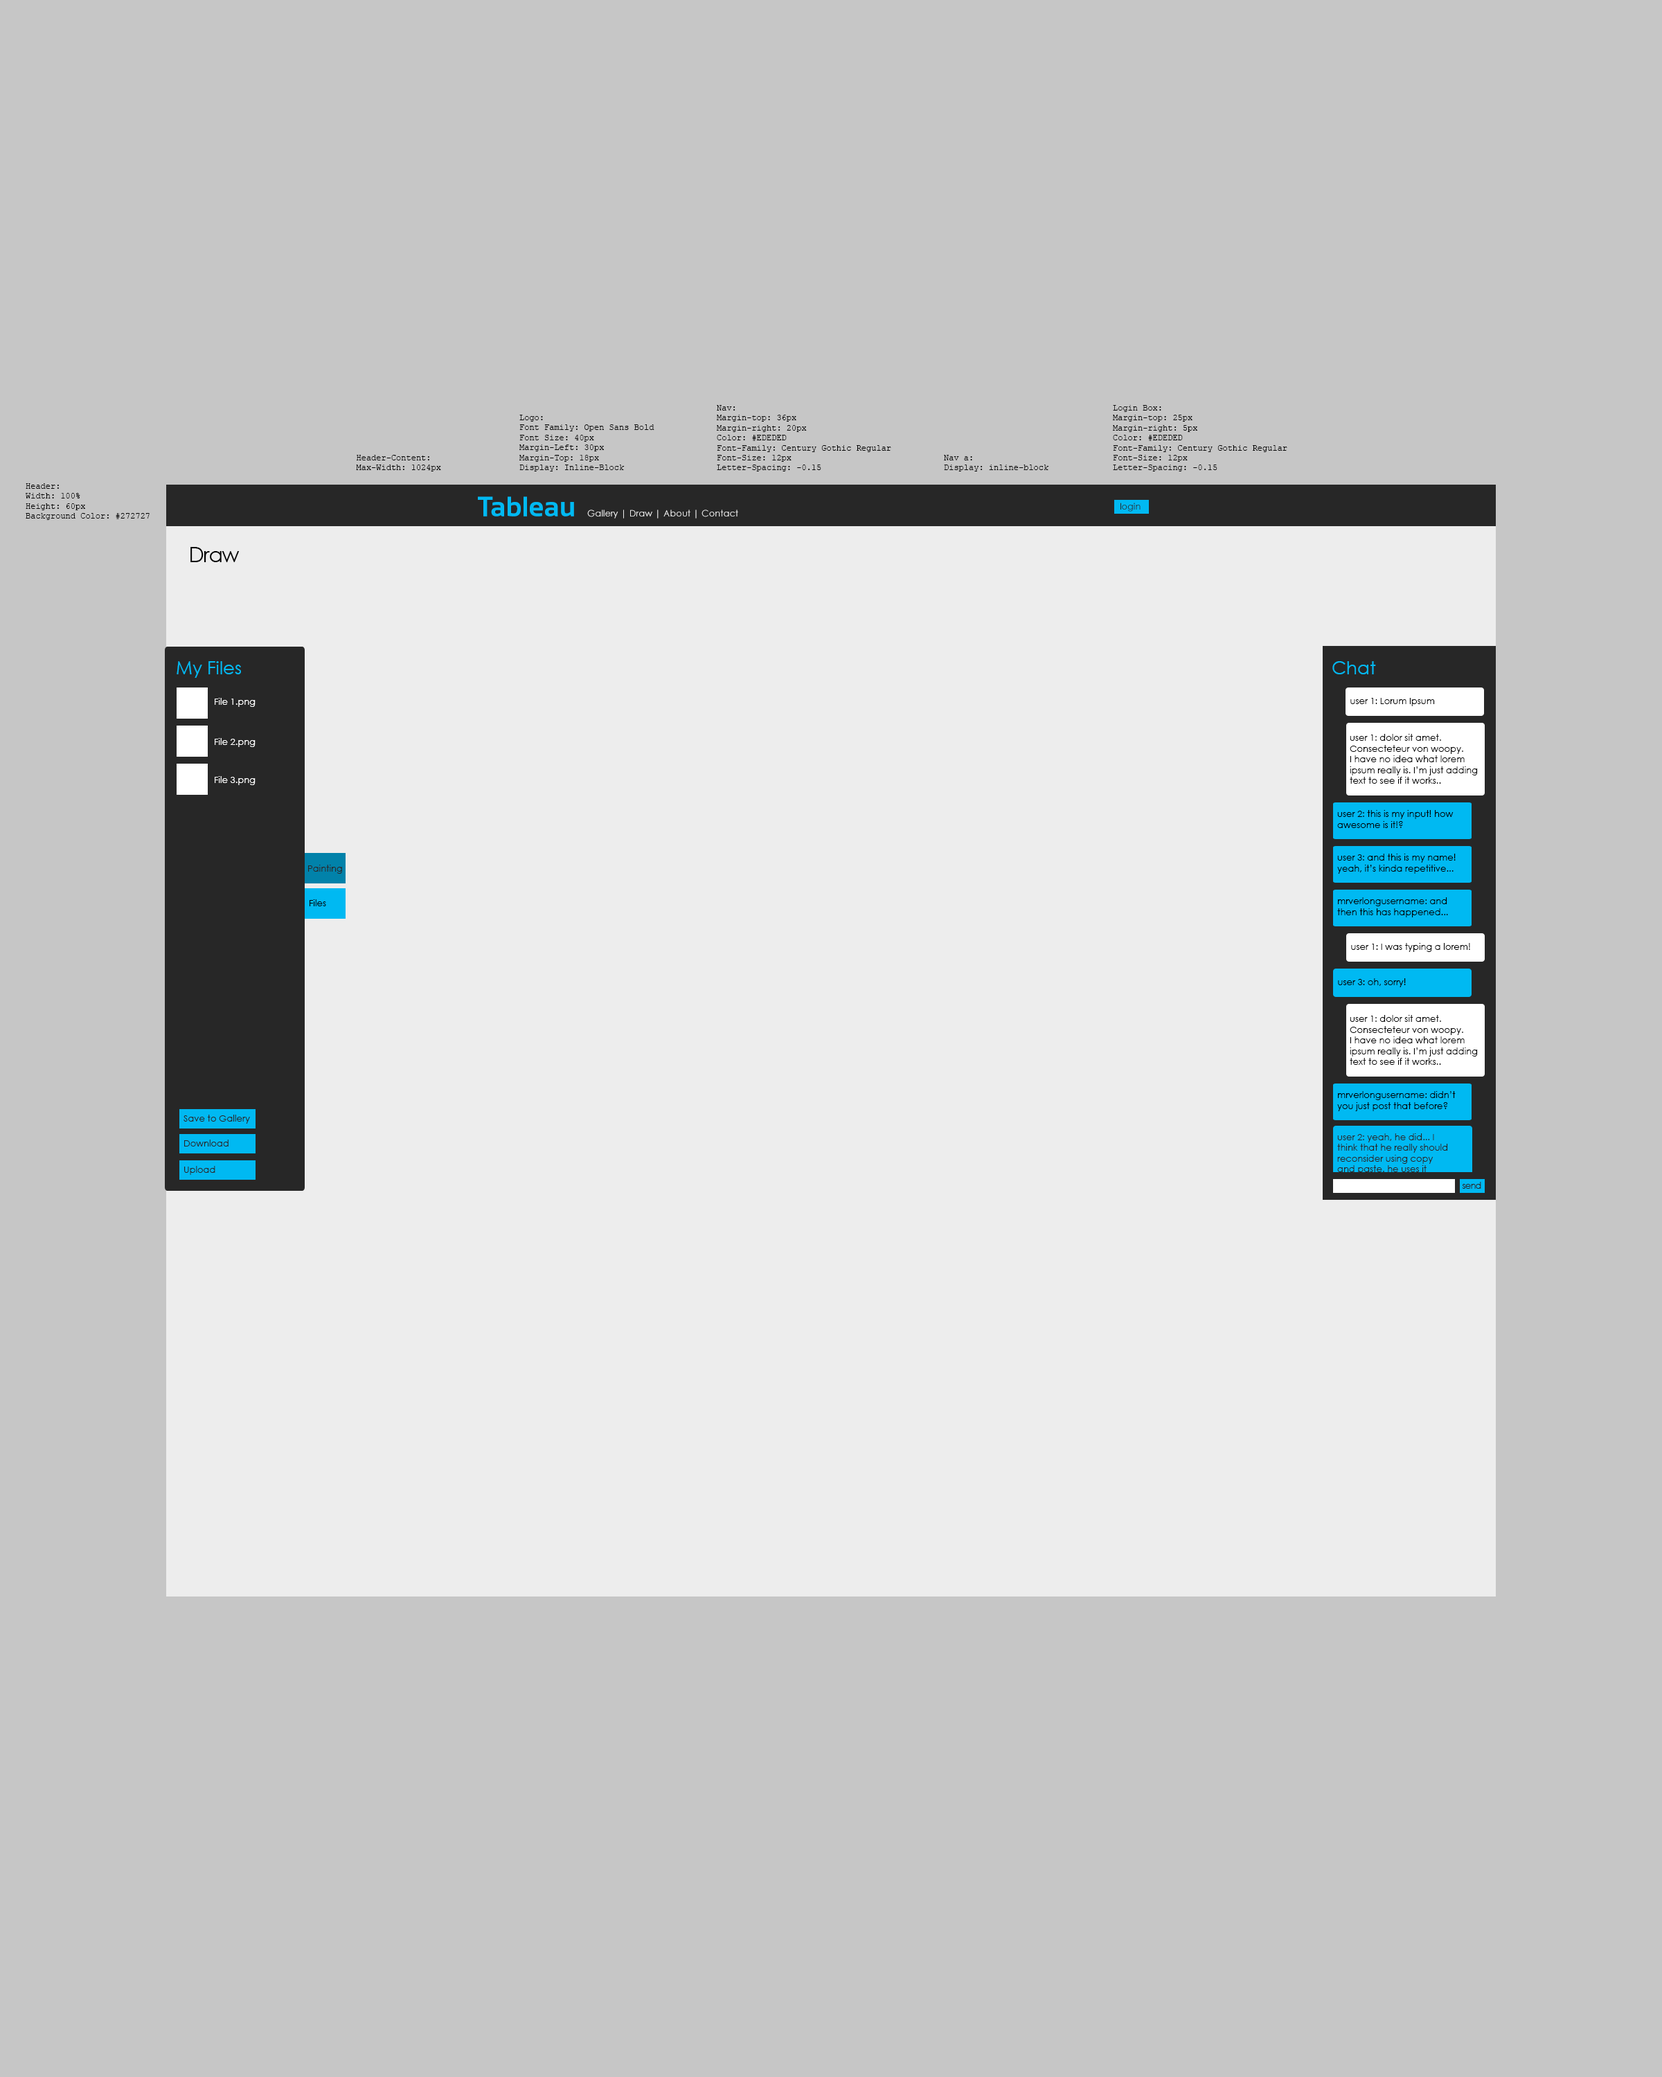
<style>
.page{position:relative;width:1662px;height:2077px;background:#c6c6c6}
.page>*{position:absolute;margin:0}
.t1{font:8.3px "CourierNewPSMT";color:#000000}
.t2{font:28px "Sansation-Bold";color:#00b9f2}
.t3{font:9px "CenturyGothic";color:#ededed}
.t4{font:9px "CenturyGothic";color:#272727}
.t5{font:20.8px "CenturyGothic";letter-spacing:-0.04em;color:#000000}
.t6{font:18px "CenturyGothic";color:#00b9f2}
.t7{font:9px "CenturyGothic";color:#ffffff}
.t8{font:9px "CenturyGothic";color:#000000}
.t9{font:9px "CenturyGothic";letter-spacing:-0.06em;color:#272727}
</style>
<div class="page">
<p class="t1" style="left:717px;top:405px;width:174px;height:66px">Nav:<br>Margin-top: 36px<br>Margin-right: 20px<br>Color: #EDEDED<br>Font-Family: Century Gothic Regular<br>Font-Size: 12px<br>Letter-Spacing: -0.15</p>
<p class="t1" style="left:1113px;top:405px;width:174px;height:66px">Login Box:<br>Margin-top: 25px<br>Margin-right: 5px<br>Color: #EDEDED<br>Font-Family: Century Gothic Regular<br>Font-Size: 12px<br>Letter-Spacing: -0.15</p>
<p class="t1" style="left:519px;top:415px;width:135px;height:56px">Logo:<br>Font Family: Open Sans Bold<br>Font Size: 40px<br>Margin-Left: 30px<br>Margin-Top: 18px<br>Display: Inline-Block</p>
<p class="t1" style="left:356px;top:455px;width:85px;height:16px">Header-Content:<br>Max-Width: 1024px</p>
<p class="t1" style="left:944px;top:455px;width:105px;height:16px">Nav a:<br>Display: inline-block</p>
<p class="t1" style="left:26px;top:483px;width:124px;height:37px">Header:<br>Width: 100%<br>Height: 60px<br>Background Color: #272727</p>
<p class="t2" style="left:478px;top:496px;width:96px;height:20px">Tableau</p>
<p class="t3" style="left:587px;top:510px;width:151px;height:9px">Gallery | Draw | About | Contact</p>
<p class="t4" style="left:1120px;top:503px;width:20px;height:9px">login</p>
<p class="t5" style="left:190px;top:547px;width:50px;height:15px">Draw</p>
<p class="t6" style="left:177px;top:661px;width:64px;height:17px">My Files</p>
<p class="t6" style="left:1332px;top:661px;width:44px;height:13px">Chat</p>
<p class="t7" style="left:215px;top:698px;width:40px;height:9px">File 1.png</p>
<p class="t8" style="left:1350px;top:698px;width:84px;height:8px">user 1: Lorum Ipsum</p>
<p class="t8" style="left:1349px;top:734px;width:128px;height:50px">user 1: dolor sit amet. <br>Consecteteur von woopy.<br>I have no idea what lorem<br>ipsum really is. I’m just adding<br>text to see if it works..</p>
<p class="t7" style="left:215px;top:738px;width:40px;height:9px">File 2.png</p>
<p class="t7" style="left:215px;top:776px;width:40px;height:9px">File 3.png</p>
<p class="t8" style="left:1337px;top:810px;width:116px;height:18px">user 2: this is my input! how <br>awesome is it!?</p>
<p class="t8" style="left:1337px;top:854px;width:118px;height:20px">user 3: and this is my name!<br>yeah, it’s kinda repetitive...</p>
<p class="t4" style="left:308px;top:865px;width:34px;height:9px">Painting</p>
<p class="t8" style="left:309px;top:899px;width:17px;height:7px">Files</p>
<p class="t8" style="left:1337px;top:897px;width:111px;height:20px">mrverlongusername: and<br>then this has happened...</p>
<p class="t8" style="left:1351px;top:943px;width:119px;height:9px">user 1: I was typing a lorem!</p>
<p class="t8" style="left:1338px;top:978px;width:67px;height:9px">user 3: oh, sorry!</p>
<p class="t8" style="left:1349px;top:1015px;width:128px;height:50px">user 1: dolor sit amet. <br>Consecteteur von woopy.<br>I have no idea what lorem<br>ipsum really is. I’m just adding<br>text to see if it works..</p>
<p class="t8" style="left:1337px;top:1091px;width:118px;height:20px">mrverlongusername: didn’t<br>you just post that before?</p>
<p class="t4" style="left:183px;top:1115px;width:67px;height:9px">Save to Gallery</p>
<p class="t4" style="left:1337px;top:1133px;width:111px;height:52px">user 2: yeah, he did... I<br>think that he really should<br>reconsider using copy<br>and paste. he uses it<br>way too often, I think...</p>
<p class="t4" style="left:184px;top:1140px;width:44px;height:6px">Download</p>
<p class="t4" style="left:184px;top:1166px;width:31px;height:9px">Upload</p>
<p class="t9" style="left:1461px;top:1182px;width:20px;height:7px">send</p>
</div>
